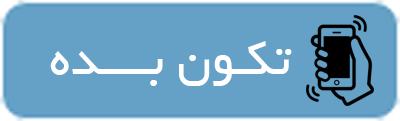
<style>
.page{position:relative;width:400px;height:121px;background:#65a1c6}
.page>*{position:absolute;margin:0}
.t1{font:53.3px "BYekan";color:#ffffff}
</style>
<div class="page">
<p class="t1" style="left:50px;top:41px;width:242px;height:45px">تکـون بــــده</p>
</div>
